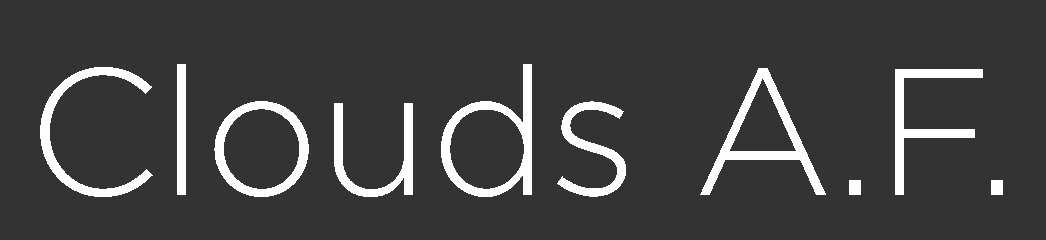
<style>
.page{position:relative;width:1046px;height:240px;background:#333333}
.page>*{position:absolute;margin:0}
.t1{font:180px "Gotham-Light";color:#fffefe}
</style>
<div class="page">
<p class="t1" style="left:40px;top:64px;width:963px;height:133px">Clouds A.F.</p>
</div>
